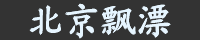
<style>
.page{position:relative;width:200px;height:40px;background:#333333}
.page>*{position:absolute;margin:0}
.t1{font:36px "KaiTi_GB2312";color:#e6f5ff}
</style>
<div class="page">
<p class="t1" style="left:30px;top:3px;width:141px;height:35px">北京飘漂</p>
</div>
